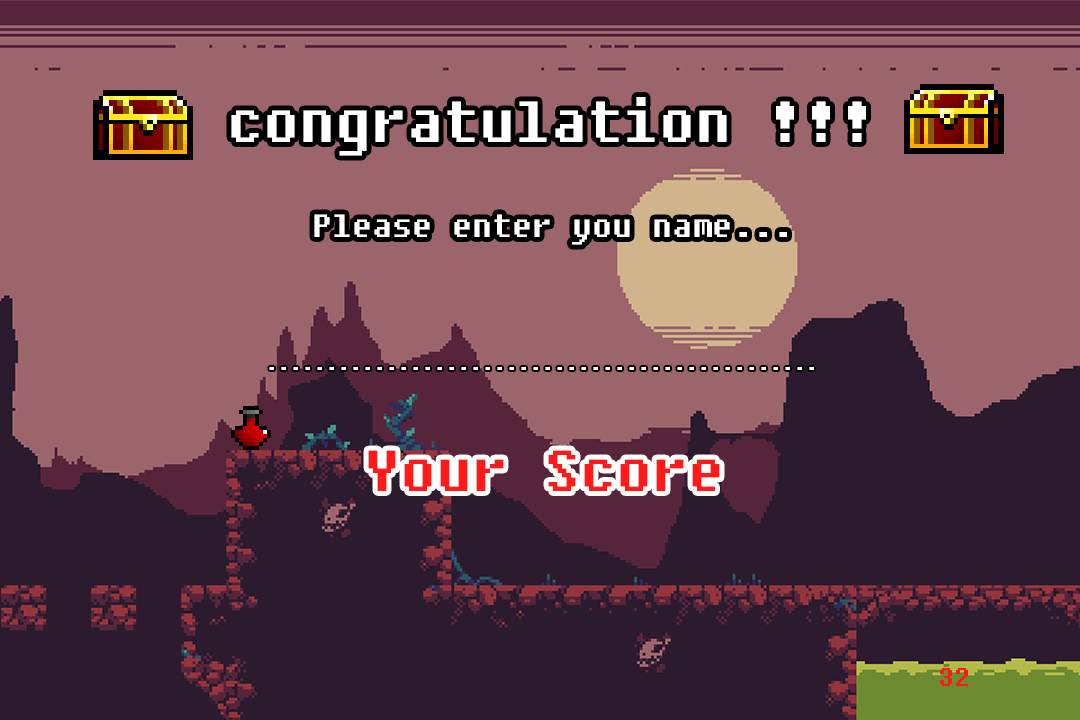
<style>
.page{position:relative;width:1080px;height:720px;background:#9c656c}
.page>*{position:absolute;margin:0}
.t1{font:72px "FixedsysExcelsiorIIIb";color:#ffffff}
.t2{font:40px "FixedsysExcelsiorIIIb";color:#ffffff}
.t3{font:24px "FixedsysExcelsiorIIIb";color:#ffffff}
.t4{font:72px "FixedsysExcelsiorIIIb";color:#ff1919}
.t5{font:32px "FixedsysExcelsiorIIIb";color:#ff1919}
</style>
<div class="page">
<p class="t1" style="left:231px;top:97px;width:635px;height:59px">congratulation !!!</p>
<p class="t2" style="left:314px;top:214px;width:473px;height:31px">Please enter you name...</p>
<p class="t3" style="left:269px;top:367px;width:545px;height:3px">..............................................</p>
<p class="t4" style="left:368px;top:450px;width:352px;height:41px">Your Score</p>
<p class="t5" style="left:940px;top:668px;width:28px;height:18px">32</p>
</div>
